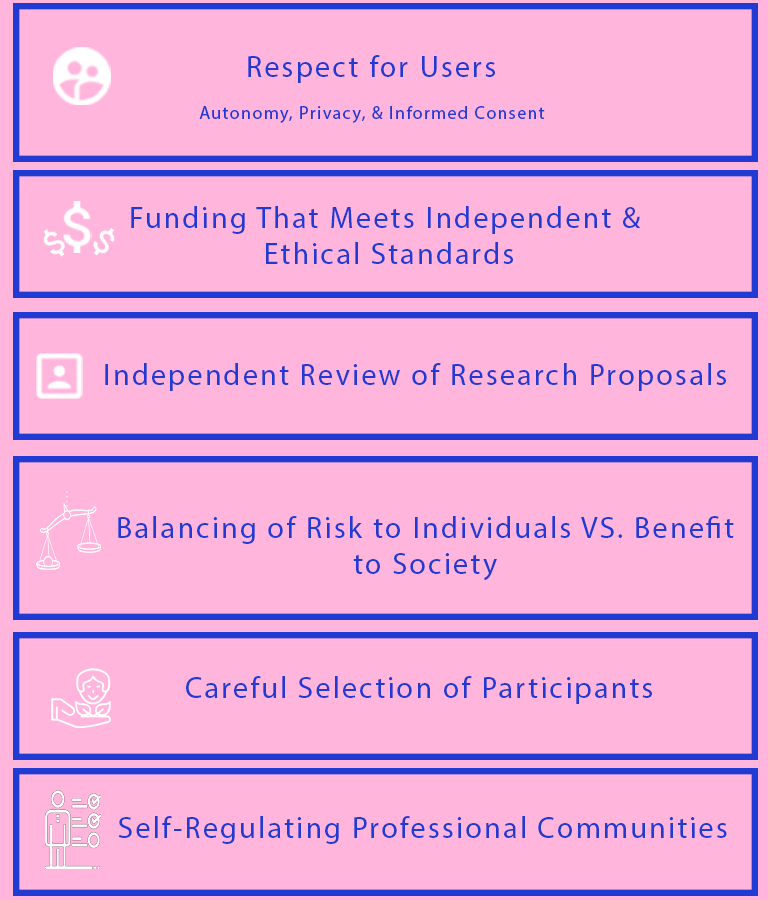
<style>
.page{position:relative;width:768px;height:900px;background:#ffb5dc}
.page>*{position:absolute;margin:0}
.t1{font:30px "MyriadPro-Regular";letter-spacing:0.075em;color:#213bd2}
.t2{font:18px "MyriadPro-Regular";letter-spacing:0.075em;color:#213bd2}
</style>
<div class="page">
<p class="t1" style="left:248px;top:55px;width:247px;height:28px">Respect for Users</p>
<p class="t2" style="left:199px;top:106px;width:346px;height:17px">Autonomy, Privacy, &amp; Informed Consent</p>
<p class="t1" style="left:131px;top:206px;width:510px;height:58px;text-align:center">Funding That Meets Independent &amp; <br>Ethical Standards</p>
<p class="t1" style="left:105px;top:363px;width:621px;height:28px">Independent Review of Research Proposals</p>
<p class="t1" style="left:118px;top:516px;width:616px;height:65px;text-align:center">Balancing of Risk to Individuals VS. Benefit <br>to Society</p>
<p class="t1" style="left:186px;top:676px;width:466px;height:28px">Careful Selection of Participants</p>
<p class="t1" style="left:118px;top:816px;width:609px;height:28px">Self-Regulating Professional Communities</p>
</div>
